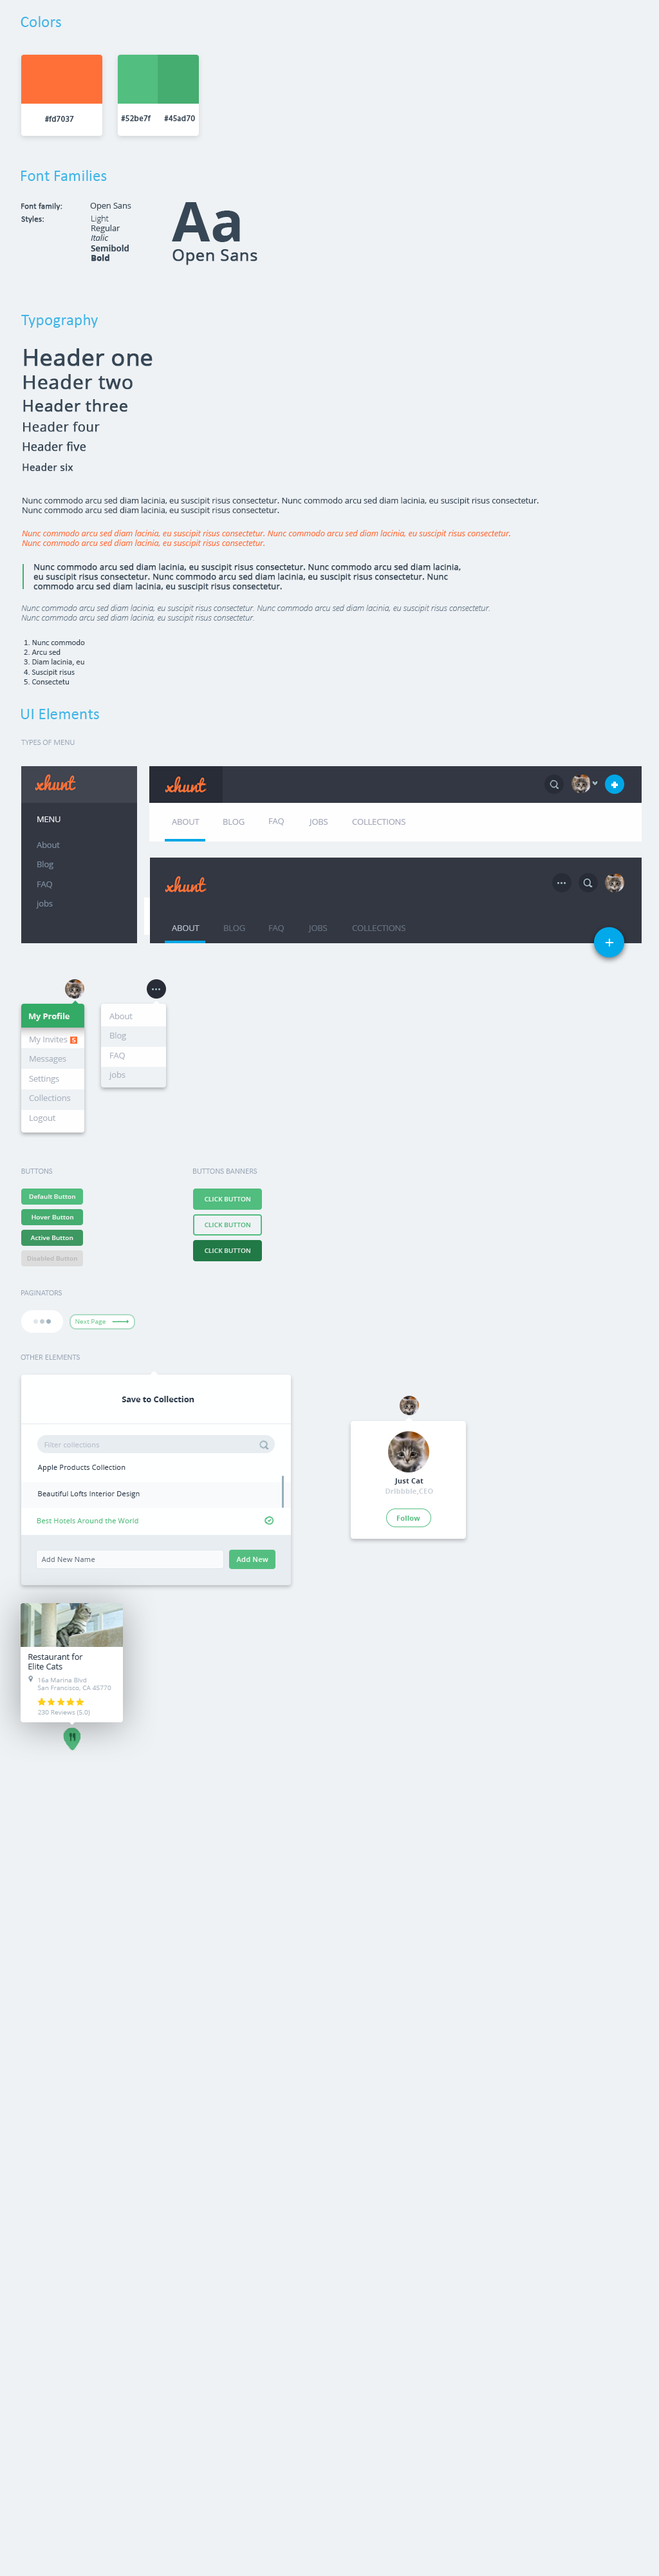
<style>
.page{position:relative;width:659px;height:2576px;background:#eef2f5}
.page>*{position:absolute;margin:0}
.t1{font:16.4px "Calibri";color:#3db5e6}
.t2{font:8.2px "MyriadPro-Regular";color:#374756;font-weight:bold}
.t3{font:8.2px "Calibri";color:#374756;font-weight:bold}
.t4{font:8.2px "OpenSans";color:#374756}
.t5{font:16.4px "OpenSans";color:#374756;font-weight:bold}
.t6{font:55.6px "OpenSans-Bold";color:#374756}
.t7{font:8.2px "OpenSans-Semibold";color:#374756;font-weight:bold}
.t8{font:8.2px "OpenSans-Light";color:#374756}
.t9{font:8.2px "OpenSans-Italic";color:#374756}
.t10{font:8.2px "OpenSans-Bold";color:#374756;font-weight:bold}
.t11{font:16.4px/22.9px "OpenSans";color:#374756;font-weight:bold}
.t12{font:22.9px/22.9px "OpenSans";color:#374756;font-weight:bold}
.t13{font:7.7px/22.9px "OpenSans";color:#374756;font-weight:bold}
.t14{font:13.1px/19.6px "OpenSans";color:#374756;font-weight:bold}
.t15{font:11.4px/19.6px "OpenSans";color:#374756;font-weight:bold}
.t16{font:9.8px/19.6px "OpenSans";color:#374756;font-weight:bold}
.t17{font:8.2px "OpenSans-Italic";color:#fe7038}
.t18{font:8.2px "OpenSans";color:#374756;font-weight:bold}
.t19{font:8.2px "OpenSansLight-Italic";color:#6e7e8e}
.t20{font:8.2px "Calibri";color:#374756}
.t21{font:8.2px/22.9px "Calibri";color:#374756}
.t22{font:8.2px "Calibri-Light";color:#9ba7b7;text-transform:uppercase}
.t23{font:8.2px "OpenSans";color:#e4e5e7}
.t24{font:8.2px "OpenSans";color:#a1a7b7}
.t25{font:8.2px "OpenSans";color:#798a9c}
.t26{font:8.2px "OpenSans";color:#b1beca}
.t27{font:8.2px "OpenSans";color:#64707e}
.t28{font:8.2px "OpenSans-Bold";color:#eaf4ec}
.t29{font:8.2px "OpenSans";color:#acb4bf}
.t30{font:6.5px "OpenSans-Semibold";color:#fffeff}
.t31{font:6.5px "OpenSans-Semibold";color:#e7f3eb}
.t32{font:6.5px "OpenSans-Semibold";color:#e8f6ed}
.t33{font:6.5px "OpenSans-Semibold";color:#50bd7e}
.t34{font:6.5px "OpenSans-Semibold";color:#d0e3d8}
.t35{font:6.5px "OpenSans-Semibold";color:#bababa}
.t36{font:6.5px "OpenSans";color:#7acd99}
.t37{font:8.2px "OpenSans-Bold";color:#29394a}
.t38{font:7.4px "OpenSans";color:#b8c0cb}
.t39{font:7.4px "OpenSans";color:#293a4a}
.t40{font:7.4px "OpenSans-Bold";color:#293a4a}
.t41{font:7.4px "OpenSans-Bold";color:#cbd1d9}
.t42{font:7.4px "OpenSans-Bold";color:#54be80}
.t43{font:7.4px "OpenSans";color:#53be80}
.t44{font:7.4px "OpenSans";color:#6c7884}
.t45{font:7.4px "OpenSans-Semibold";color:#e3f6e9}
.t46{font:8.2px "OpenSans";color:#29394a}
.t47{font:6.5px "OpenSans";color:#a9b5c1}
</style>
<div class="page">
<p class="t1" style="left:21px;top:16px;width:40px;height:11px">Colors</p>
<p class="t2" style="left:45px;top:116px;width:29px;height:6px">#fd7037</p>
<p class="t2" style="left:121px;top:115px;width:30px;height:7px">#52be7f</p>
<p class="t2" style="left:164px;top:115px;width:31px;height:7px">#45ad70</p>
<p class="t1" style="left:21px;top:170px;width:86px;height:11px">Font Families</p>
<p class="t3" style="left:21px;top:203px;width:41px;height:8px">Font family:</p>
<p class="t4" style="left:90px;top:203px;width:41px;height:8px">Open Sans</p>
<p class="t5" style="left:172px;top:202px;width:86px;height:63px"><span class="t6">Aa<br></span>Open Sans</p>
<p class="t3" style="left:21px;top:216px;width:23px;height:7px">Styles:</p>
<p class="t7" style="left:91px;top:215px;width:38px;height:46px"><span class="t8">Light<br></span><span class="t4">Regular<br></span><span class="t9">Italic<br></span>Semibold<br><span class="t10">Bold</span></p>
<p class="t1" style="left:21px;top:314px;width:77px;height:14px">Typography</p>
<p class="t11" style="left:23px;top:348px;width:130px;height:123px"><span class="t12">Header one<br></span><span class="t13">Header two<br></span>Header three<br><span class="t14">Header four<br></span><span class="t15">Header five<br></span><span class="t16">Header six</span></p>
<p class="t4" style="left:23px;top:497px;width:516px;height:18px">Nunc commodo arcu sed diam lacinia, eu suscipit risus consectetur. Nunc commodo arcu sed diam lacinia, eu suscipit risus consectetur. <br>Nunc commodo arcu sed diam lacinia, eu suscipit risus consectetur.</p>
<p class="t17" style="left:22px;top:530px;width:489px;height:18px">Nunc commodo arcu sed diam lacinia, eu suscipit risus consectetur. Nunc commodo arcu sed diam lacinia, eu suscipit risus consectetur. <br>Nunc commodo arcu sed diam lacinia, eu suscipit risus consectetur.</p>
<p class="t18" style="left:33px;top:563px;width:428px;height:29px">Nunc commodo arcu sed diam lacinia, eu suscipit risus consectetur. Nunc commodo arcu sed diam lacinia,<br>eu suscipit risus consectetur. Nunc commodo arcu sed diam lacinia, eu suscipit risus consectetur. Nunc<br>commodo arcu sed diam lacinia, eu suscipit risus consectetur.</p>
<p class="t19" style="left:21px;top:605px;width:469px;height:18px">Nunc commodo arcu sed diam lacinia, eu suscipit risus consectetur. Nunc commodo arcu sed diam lacinia, eu suscipit risus consectetur. <br>Nunc commodo arcu sed diam lacinia, eu suscipit risus consectetur.</p>
<p class="t20" style="left:24px;top:639px;width:61px;height:45px"><span class="t21">1. </span>Nunc commodo<br>2. Arcu sed<br>3. Diam lacinia, eu <br>4. Suscipit risus <br>5. Consectetu</p>
<p class="t1" style="left:21px;top:708px;width:78px;height:11px">UI Elements</p>
<p class="t22" style="left:21px;top:740px;width:54px;height:5px">TyPes of menu</p>
<p class="t23" style="left:37px;top:816px;width:24px;height:6px">MENU</p>
<p class="t24" style="left:172px;top:819px;width:28px;height:6px">ABOUT</p>
<p class="t24" style="left:223px;top:819px;width:22px;height:6px">BLOG</p>
<p class="t24" style="left:269px;top:818px;width:15px;height:7px">FAQ</p>
<p class="t24" style="left:308px;top:819px;width:20px;height:7px">JOBS</p>
<p class="t24" style="left:352px;top:819px;width:54px;height:6px">COLLECTIONS</p>
<p class="t25" style="left:36px;top:841px;width:24px;height:67px">About<br><br>Blog<br><br>FAQ<br><br>jobs</p>
<p class="t26" style="left:172px;top:925px;width:28px;height:6px">ABOUT</p>
<p class="t27" style="left:224px;top:925px;width:21px;height:6px">BLOG</p>
<p class="t27" style="left:269px;top:925px;width:15px;height:7px">FAQ</p>
<p class="t27" style="left:308px;top:925px;width:20px;height:7px">JOBS</p>
<p class="t27" style="left:352px;top:925px;width:54px;height:6px">COLLECTIONS</p>
<p class="t28" style="left:29px;top:1013px;width:41px;height:8px">My Profile</p>
<p class="t29" style="left:109px;top:1013px;width:24px;height:67px">About<br><br>Blog<br><br>FAQ<br><br>jobs</p>
<p class="t29" style="left:29px;top:1037px;width:42px;height:86px">My Invites<br><br>Messages<br><br>Settings<br><br>Collections<br><br>Logout</p>
<p class="t30" style="left:72px;top:1038px;width:4px;height:4px">5</p>
<p class="t22" style="left:21px;top:1169px;width:32px;height:5px">BUTTONS</p>
<p class="t22" style="left:193px;top:1169px;width:65px;height:5px">BuTTONS BANNERS</p>
<p class="t31" style="left:29px;top:1194px;width:46px;height:5px">Default Button</p>
<p class="t32" style="left:205px;top:1197px;width:45px;height:4px">CLICK BUTTON</p>
<p class="t31" style="left:32px;top:1215px;width:41px;height:4px">Hover Button</p>
<p class="t33" style="left:205px;top:1223px;width:45px;height:4px">CLICK BUTTON</p>
<p class="t31" style="left:30px;top:1236px;width:43px;height:4px">Active Button</p>
<p class="t34" style="left:205px;top:1248px;width:45px;height:5px">CLICK BUTTON</p>
<p class="t35" style="left:27px;top:1256px;width:50px;height:5px">Disabled Button</p>
<p class="t22" style="left:21px;top:1290px;width:41px;height:5px">PAGINATORS</p>
<p class="t36" style="left:75px;top:1319px;width:31px;height:6px">Next Page</p>
<p class="t22" style="left:21px;top:1355px;width:59px;height:5px">OTHER ELEMENTS</p>
<p class="t37" style="left:122px;top:1396px;width:72px;height:6px">Save to Collection</p>
<p class="t38" style="left:44px;top:1442px;width:56px;height:5px">Filter collections</p>
<p class="t39" style="left:37px;top:1465px;width:89px;height:7px">Apple Products Collection</p>
<p class="t40" style="left:395px;top:1478px;width:29px;height:7px">Just Cat</p>
<p class="t39" style="left:38px;top:1491px;width:102px;height:7px">Beautiful Lofts Interior Design</p>
<p class="t41" style="left:386px;top:1489px;width:47px;height:6px">Dribbble,CEO</p>
<p class="t42" style="left:397px;top:1516px;width:23px;height:5px">Follow</p>
<p class="t43" style="left:37px;top:1518px;width:101px;height:5px">Best Hotels Around the World</p>
<p class="t44" style="left:41px;top:1557px;width:54px;height:5px">Add New Name</p>
<p class="t45" style="left:236px;top:1557px;width:32px;height:5px">Add New</p>
<p class="t46" style="left:28px;top:1653px;width:55px;height:16px">Restaurant for<br>Elite Cats</p>
<p class="t47" style="left:37px;top:1678px;width:74px;height:13px">16a Marina Blvd<br>San Francisco, CA 45770</p>
<p class="t47" style="left:38px;top:1710px;width:52px;height:6px">230 Reviews (5.0)</p>
</div>
